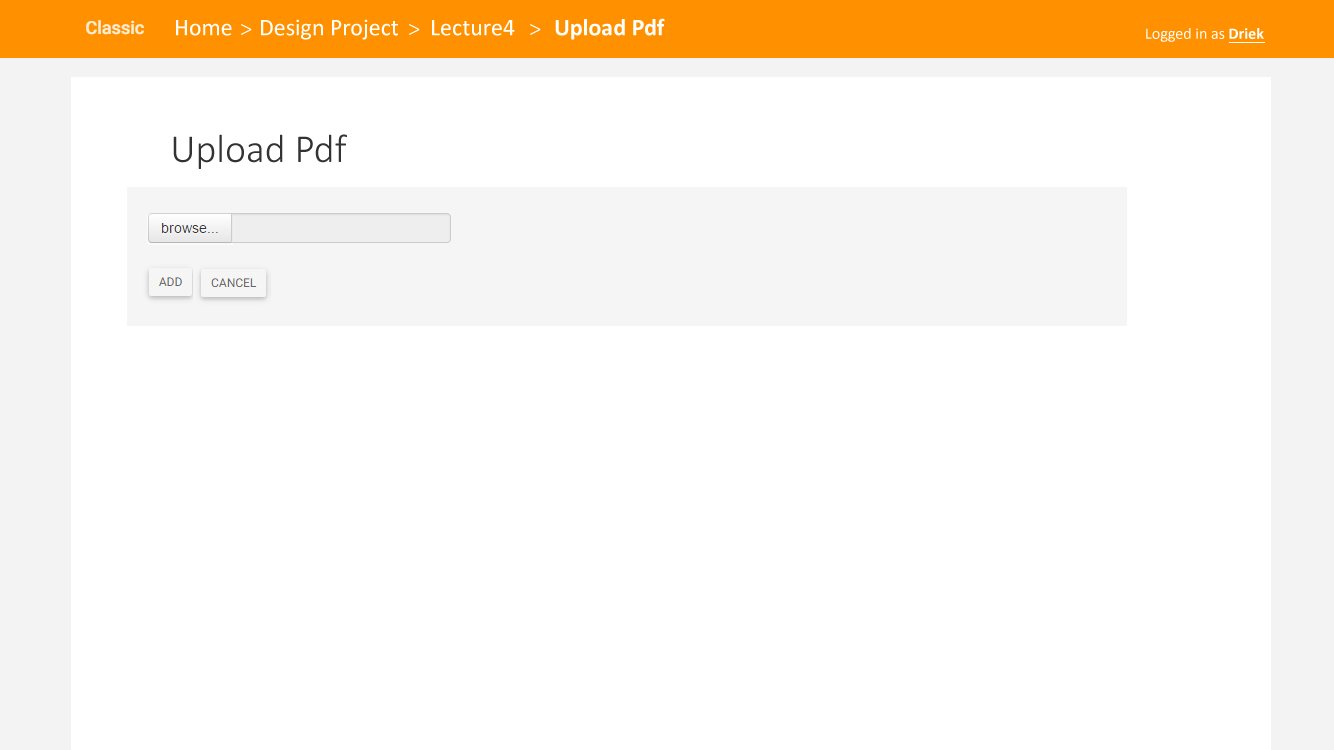
<style>
.page{position:relative;width:1334px;height:750px;background:#ffffff}
.page>*{position:absolute;margin:0}
.t1{font:24px "Calibri";color:#ffffff}
.t2{font:24px "Calibri-Light";color:#ffffff}
.t3{font:24px "Calibri-Bold";color:#ffffff}
.t4{font:16px "Calibri";color:#ffffff}
.t5{font:16px "Calibri-Bold";color:#ffffff}
.t6{font:40px "Calibri-Light";color:#333333}
</style>
<div class="page">
<p class="t1" style="left:176px;top:20px;width:56px;height:16px">Home</p>
<p class="t2" style="left:241px;top:24px;width:11px;height:11px">&gt;</p>
<p class="t1" style="left:261px;top:19px;width:137px;height:21px">Design Project</p>
<p class="t2" style="left:409px;top:24px;width:11px;height:11px">&gt;</p>
<p class="t1" style="left:432px;top:20px;width:83px;height:16px">Lecture4</p>
<p class="t2" style="left:530px;top:24px;width:11px;height:11px">&gt;</p>
<p class="t3" style="left:555px;top:18px;width:110px;height:22px">Upload Pdf</p>
<p class="t4" style="left:1146px;top:28px;width:118px;height:14px">Logged in as <span class="t5">Driek</span></p>
<p class="t6" style="left:173px;top:134px;width:174px;height:35px">Upload Pdf</p>
</div>
